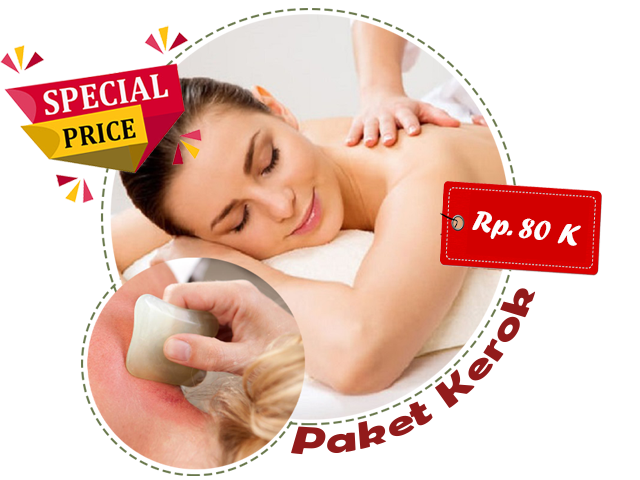
<style>
.page{position:relative;width:640px;height:480px;background:#ffffff}
.page>*{position:absolute;margin:0}
.t1{font:30.9px "ForteMT";color:#fefefe}
.t2{font:37.1px "BerlinSansFBDemi-Bold";color:#921b1b;scale:1.18 1}
</style>
<div class="page">
<p class="t1" style="left:472px;top:211px;width:109px;height:35px;rotate:9deg">Rp. 80 K</p>
<p class="t2" style="left:291px;top:288px;width:245px;height:167px;rotate:-34deg">Paket Kerok</p>
</div>
